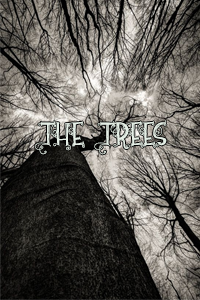
<style>
.page{position:relative;width:200px;height:300px}
.page>*{position:absolute;margin:0}
.t1{font:48px "hazelgrace";color:#e5efe6}
</style>
<div class="page">
<p class="t1" style="left:35px;top:120px;width:132px;height:35px">THE TREES</p>
</div>
